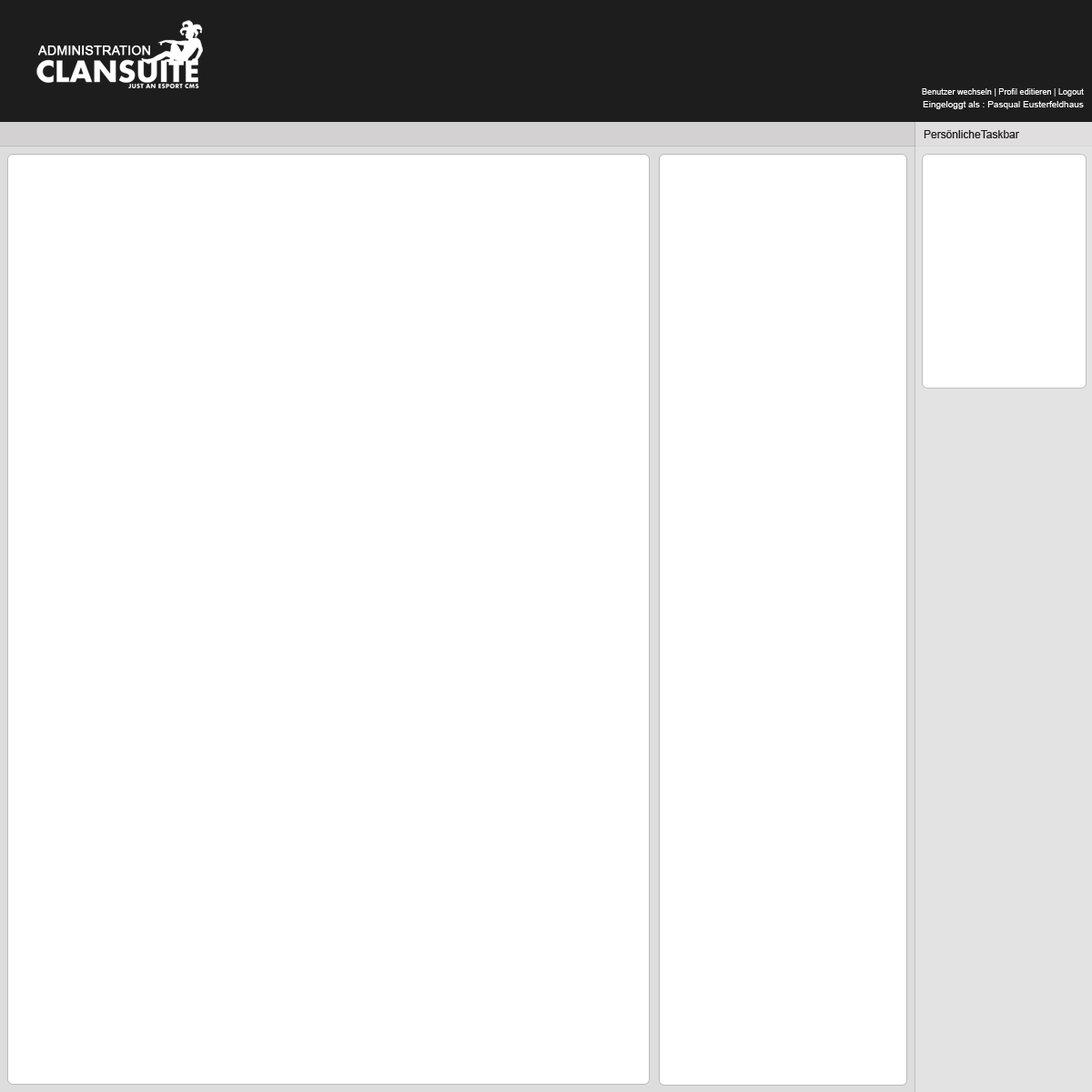
<style>
.page{position:relative;width:1092px;height:1092px;background:#ffffff}
.page>*{position:absolute;margin:0}
.t1{font:12.7px "ArialMT";color:#ffffff;text-transform:uppercase;font-weight:bold}
.t2{font:9.1px "ArialMT";color:#ffffff;scale:0.91 1}
.t3{font:9.1px "ArialMT";color:#ffffff}
.t4{font:10.9px "ArialMT";color:#1e1d1d}
</style>
<div class="page">
<p class="t1" style="left:38px;top:45px;width:112px;height:11px">Administration</p>
<p class="t2" style="left:922px;top:88px;width:162px;height:8px">Benutzer wechseln | Profil editieren | Logout</p>
<p class="t3" style="left:923px;top:101px;width:161px;height:8px">Eingeloggt als : Pasqual Eusterfeldhaus</p>
<p class="t4" style="left:924px;top:130px;width:95px;height:8px">PersönlicheTaskbar</p>
</div>
